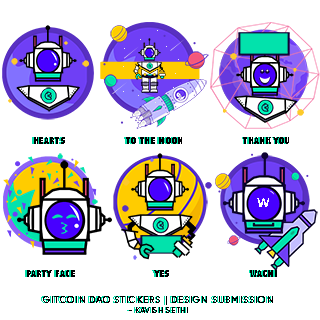
<style>
.page{position:relative;width:320px;height:320px;background:#ffffff}
.page>*{position:absolute;margin:0}
.t1{font:9.9px "AbadiMT-CondensedExtraBold";letter-spacing:0.05em}
.t2{font:9.9px "AbadiMT-CondensedExtraBold";letter-spacing:0.05em;color:#000000}
.t3{font:13.3px "Gilroy-Bold";letter-spacing:0.05em;color:#fefefe}
.t4{font:9.9px/9.9px "Gilroy-Bold";letter-spacing:0.05em;color:#02e2ac}
.t5{font:7.9px/9.9px "Gilroy-Bold";letter-spacing:0.05em;color:#02e2ac}
.t6{font:9.9px/9.9px "Gilroy-Bold";letter-spacing:0.05em;color:#000000}
.t7{font:7.9px/9.9px "Gilroy-Bold";letter-spacing:0.05em;color:#000000}
</style>
<div class="page">
<p class="t1" style="left:32px;top:137px;width:255px;height:7px">HEARTS                  TO THE MOON                 THANK YOU</p>
<p class="t2" style="left:34px;top:137px;width:255px;height:7px">HEARTS                  TO THE MOON                 THANK YOU</p>
<p class="t3" style="left:257px;top:198px;width:12px;height:9px">W</p>
<p class="t1" style="left:25px;top:270px;width:250px;height:7px">PARTY FACE                        YES                        WAGMI</p>
<p class="t2" style="left:27px;top:270px;width:250px;height:7px">PARTY FACE                        YES                        WAGMI</p>
<p class="t4" style="left:41px;top:296px;width:230px;height:17px;text-align:center">GITCOIN DAO STICKERS | DESIGN SUBMISSION<br><span class="t5">- KAVISH SETHI</span></p>
<p class="t6" style="left:43px;top:296px;width:230px;height:17px;text-align:center">GITCOIN DAO STICKERS | DESIGN SUBMISSION<br><span class="t7">- KAVISH SETHI</span></p>
</div>
